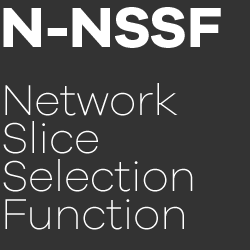
<style>
.page{position:relative;width:250px;height:250px;background:#333333}
.page>*{position:absolute;margin:0}
.t1{font:58.5px "GalanoGrotesque-Bold";letter-spacing:-0.01em;color:#ffffff}
.t2{font:44.5px/38px "GalanoGrotesque-ExtraLight";letter-spacing:-0.01em;color:#ffffff}
</style>
<div class="page">
<p class="t1" style="left:3px;top:7px;width:218px;height:41px">N-NSSF</p>
<p class="t2" style="left:3px;top:83px;width:190px;height:147px">Network <br>Slice <br>Selection <br>Function</p>
</div>
